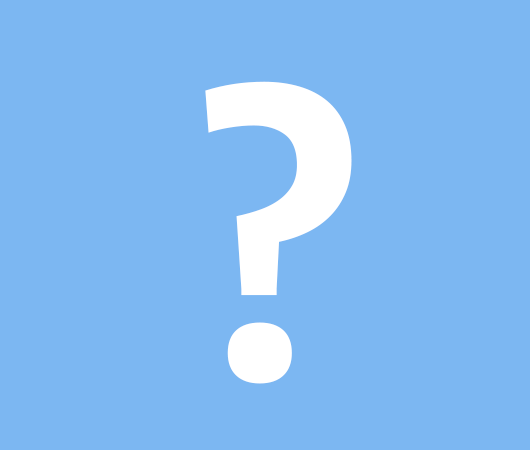
<style>
.page{position:relative;width:530px;height:450px;background:#7cb7f2}
.page>*{position:absolute;margin:0}
.t1{font:400px "EncodeSansCompressed-Bold";letter-spacing:0.015em;color:#ffffff}
</style>
<div class="page">
<p class="t1" style="left:205px;top:81px;width:147px;height:303px">?</p>
</div>
